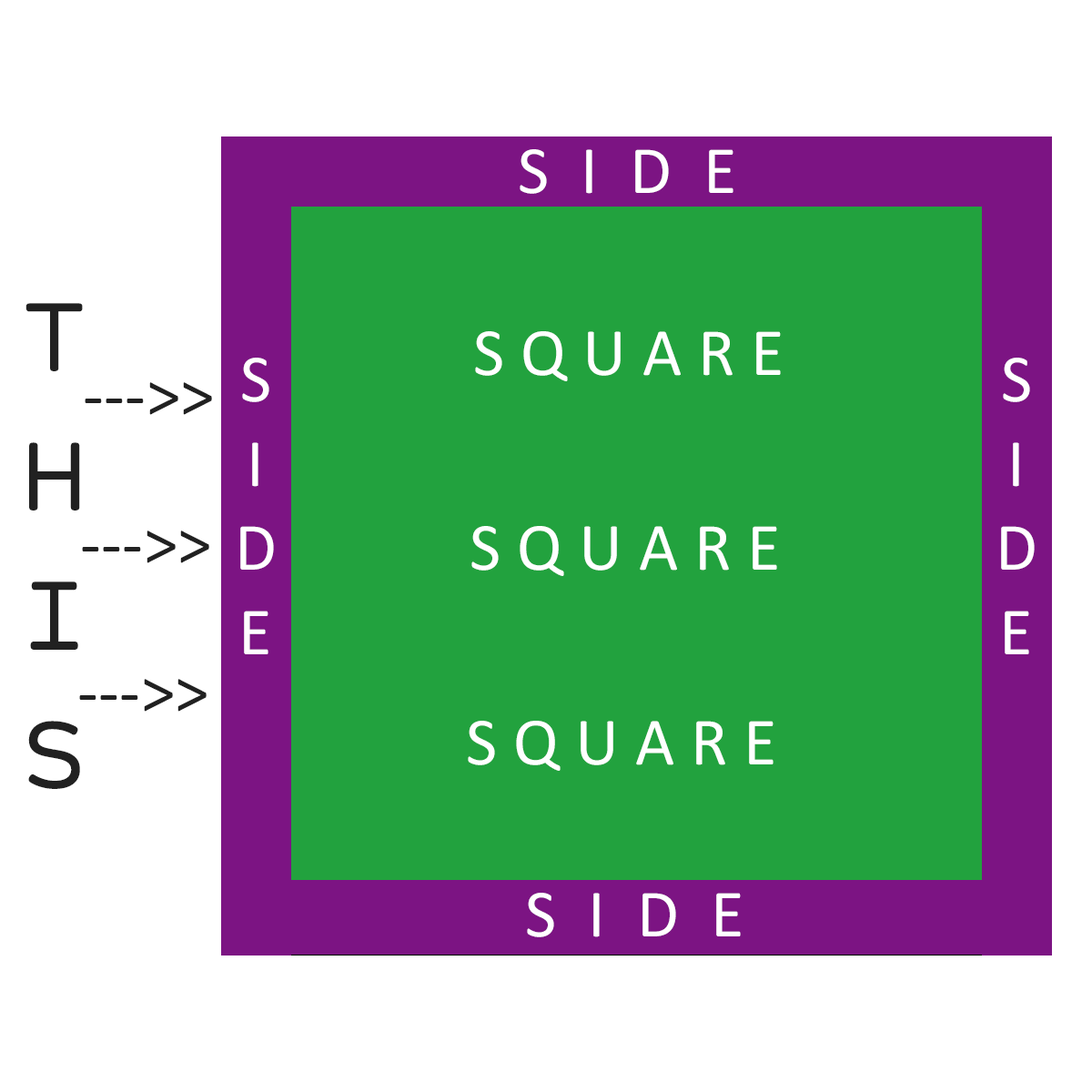
<style>
.page{position:relative;width:1092px;height:1092px;background:#ffffff}
.page>*{position:absolute;margin:0}
.t1{font:68.1px "PrinterDisplayFont1";letter-spacing:0.005em;color:#212121}
.t2{font:68.1px "Calibri";letter-spacing:0.005em;color:#ffffff}
.t3{font:68.1px "Calibri";letter-spacing:0.005em;color:#212121}
</style>
<div class="page">
<p class="t1" style="left:25px;top:303px;width:58px;height:486px;text-align:center">T H I S</p>
<p class="t2" style="left:475px;top:331px;width:306px;height:50px">S Q U A R E</p>
<p class="t3" style="left:85px;top:382px;width:127px;height:33px">---&gt;&gt;</p>
<p class="t3" style="left:82px;top:531px;width:127px;height:32px">---&gt;&gt;</p>
<p class="t2" style="left:471px;top:526px;width:306px;height:50px">S Q U A R E</p>
<p class="t3" style="left:79px;top:679px;width:128px;height:33px">---&gt;&gt;</p>
<p class="t2" style="left:468px;top:721px;width:305px;height:50px">S Q U A R E</p>
</div>
